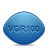
<style>
.page{position:relative;width:48px;height:48px;background:#ffffff}
.page>*{position:absolute;margin:0}
.t1{font:8px "Arial-BoldMT";letter-spacing:0.02em;color:#21619e}
</style>
<div class="page">
<p class="t1" style="left:8px;top:25px;width:32px;height:7px">VGR100</p>
<p class="t1" style="left:8px;top:25px;width:32px;height:7px">VGR100</p>
</div>
